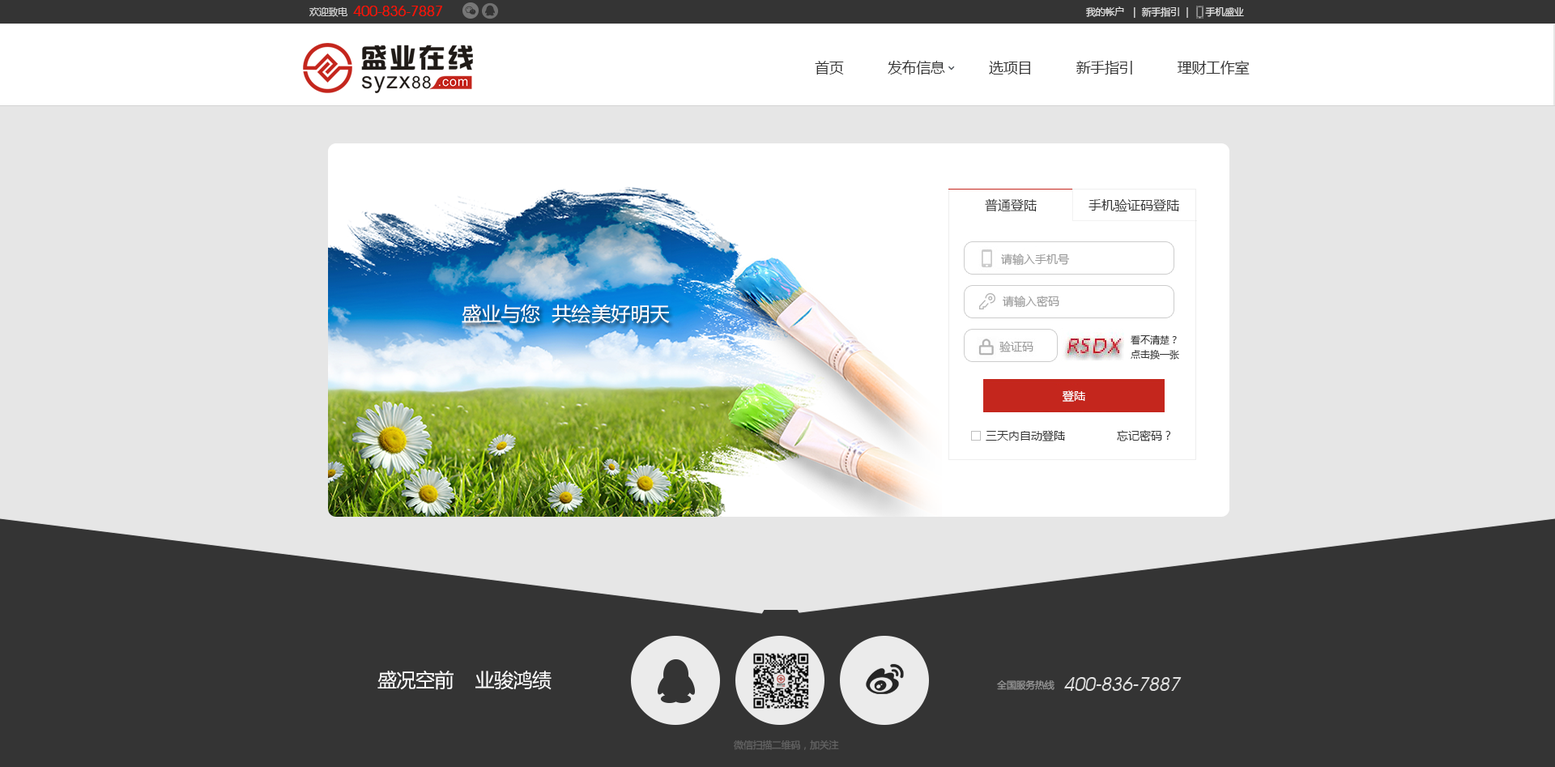
<style>
.page{position:relative;width:1555px;height:767px;background:#e6e6e6}
.page>*{position:absolute;margin:0}
.t1{font:14.6px "AvantGardeITCbyBT-Book";letter-spacing:-0.02em;color:#ff0f01}
.t2{font:9.7px "MicrosoftYaHei";letter-spacing:-0.02em;color:#d3d3d3}
.t3{font:9.7px "MicrosoftYaHei";letter-spacing:-0.02em;color:#e1e1e1}
.t4{font:14.6px "MicrosoftYaHei";letter-spacing:-0.02em;color:#343434}
.t5{font:13px "MicrosoftYaHei";color:#333333}
.t6{font:13px "MicrosoftYaHei";color:#343434}
.t7{font:11.3px "MicrosoftYaHei";color:#9a9a9a}
.t8{font:19.4px "MicrosoftYaHei";color:#ffffff}
.t9{font:9.7px/14.6px "MicrosoftYaHei";color:#333333}
.t10{font:11.3px "MicrosoftYaHei";color:#ffffff}
.t11{font:11.3px "MicrosoftYaHei";color:#333333}
.t12{font:19.4px "MicrosoftYaHei";letter-spacing:-0.02em;color:#ffffff}
.t13{font:19.3px "AvantGardeITCbyBT-Book";letter-spacing:-0.02em;color:#e1e1e1;font-style:italic}
.t14{font:9.7px "MicrosoftYaHei";letter-spacing:-0.02em;color:#9a9a9a}
.t15{font:9.7px "MicrosoftYaHei";letter-spacing:-0.02em;color:#646464}
</style>
<div class="page">
<p class="t1" style="left:353px;top:6px;width:89px;height:10px">400-836-7887</p>
<p class="t2" style="left:309px;top:7px;width:38px;height:10px">欢迎致电</p>
<p class="t3" style="left:1086px;top:6px;width:158px;height:12px">我的帐户  ｜ 新手指引 ｜     手机盛业</p>
<p class="t4" style="left:815px;top:60px;width:435px;height:15px">首页           发布信息           选项目           新手指引           理财工作室</p>
<p class="t5" style="left:985px;top:198px;width:52px;height:13px">普通登陆</p>
<p class="t6" style="left:1088px;top:198px;width:91px;height:13px">手机验证码登陆</p>
<p class="t7" style="left:1001px;top:253px;width:69px;height:13px">请输入手机号</p>
<p class="t8" style="left:462px;top:304px;width:208px;height:20px">盛业与您  共绘美好明天</p>
<p class="t7" style="left:1003px;top:296px;width:56px;height:12px">请输入密码</p>
<p class="t9" style="left:1131px;top:334px;width:48px;height:26px">看不清楚？<br>点击换一张</p>
<p class="t10" style="left:1062px;top:390px;width:23px;height:12px">登陆</p>
<p class="t11" style="left:986px;top:430px;width:79px;height:11px">三天内自动登陆</p>
<p class="t11" style="left:1117px;top:430px;width:54px;height:11px">忘记密码？</p>
<p class="t12" style="left:377px;top:671px;width:174px;height:19px">盛况空前    业骏鸿绩</p>
<p class="t13" style="left:1064px;top:677px;width:118px;height:14px">400-836-7887</p>
<p class="t14" style="left:997px;top:679px;width:57px;height:11px">全国服务热线</p>
<p class="t15" style="left:734px;top:739px;width:105px;height:11px">微信扫描二维码，加关注</p>
</div>
